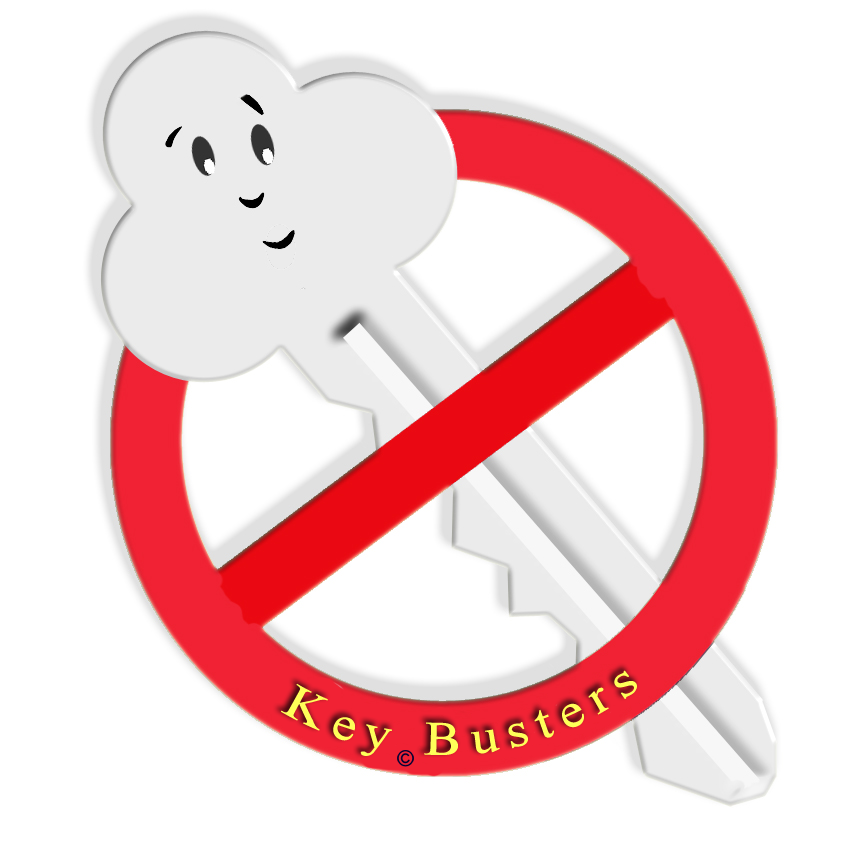
<style>
.page{position:relative;width:864px;height:864px;background:#ffffff}
.page>*{position:absolute;margin:0}
.t1{font:48px "TimesNewRomanPSMT";letter-spacing:0.18em;color:#ffff59}
</style>
<div class="page">
<p class="t1" style="left:281px;top:670px;width:356px;height:86px;rotate:-5deg">Key Busters</p>
</div>
